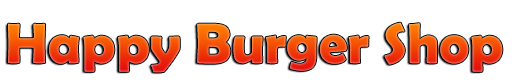
<style>
.page{position:relative;width:512px;height:83px;background:#ffffff}
.page>*{position:absolute;margin:0}
.t1{font:57px "BerlinSansFBDemi-Bold"}
</style>
<div class="page">
<p class="t1" style="left:8px;top:22px;width:495px;height:51px">Happy Burger Shop</p>
</div>
